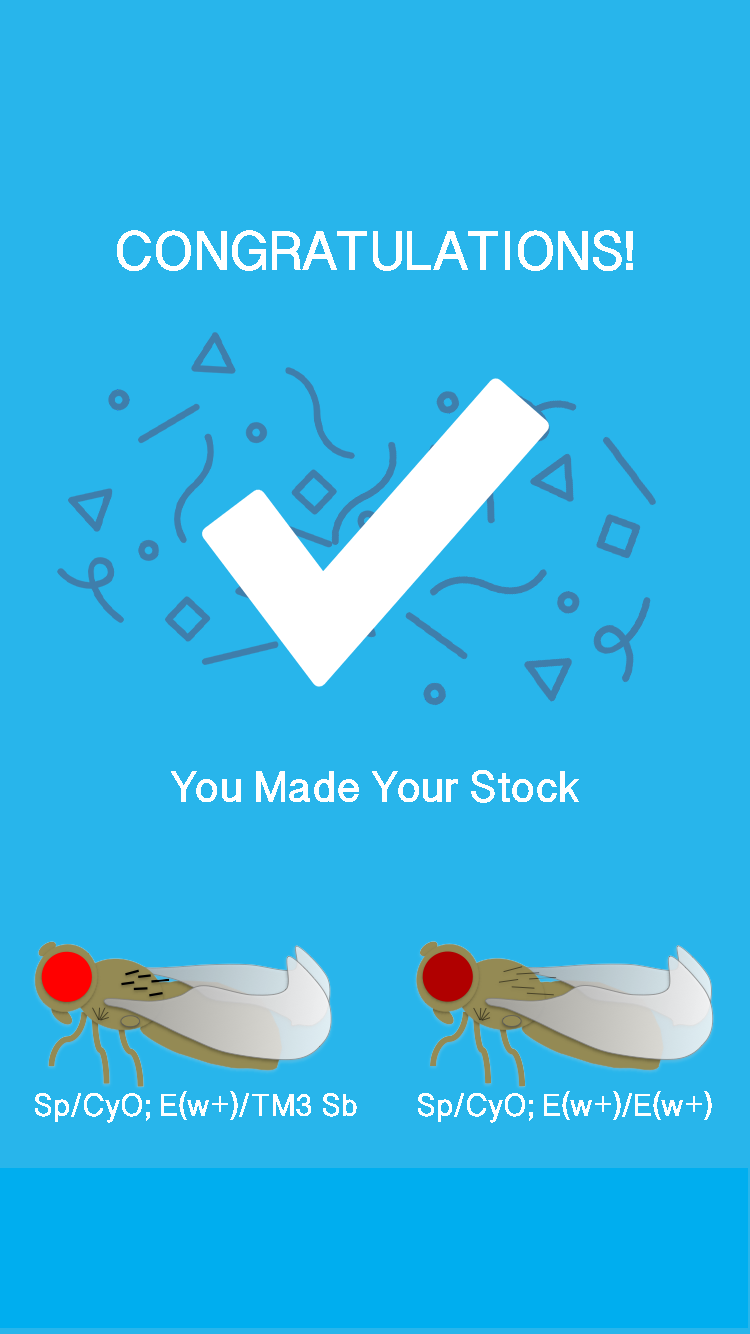
<style>
.page{position:relative;width:750px;height:1334px;background:#28b5eb}
.page>*{position:absolute;margin:0}
.t1{font:61.8px "OriyaSangamMN-Bold";color:#ffffff}
.t2{font:50px "OriyaSangamMN-Bold";color:#ffffff}
.t3{font:36px "OriyaSangamMN-Bold";color:#ffffff}
</style>
<div class="page">
<p class="t1" style="left:117px;top:230px;width:516px;height:41px">CONGRATULATIONS!</p>
<p class="t2" style="left:171px;top:770px;width:408px;height:33px">You Made Your Stock</p>
<p class="t3" style="left:35px;top:1091px;width:322px;height:32px">Sp/CyO; E(w+)/TM3 Sb</p>
<p class="t3" style="left:418px;top:1091px;width:294px;height:32px">Sp/CyO; E(w+)/E(w+)</p>
</div>
